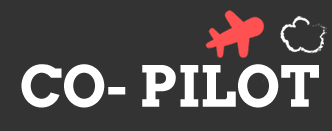
<style>
.page{position:relative;width:332px;height:131px;background:#333333}
.page>*{position:absolute;margin:0}
.t1{font:56.2px "Arvo-Bold";color:#ffffff}
</style>
<div class="page">
<p class="t1" style="left:21px;top:64px;width:298px;height:44px">CO- PILOT</p>
</div>
